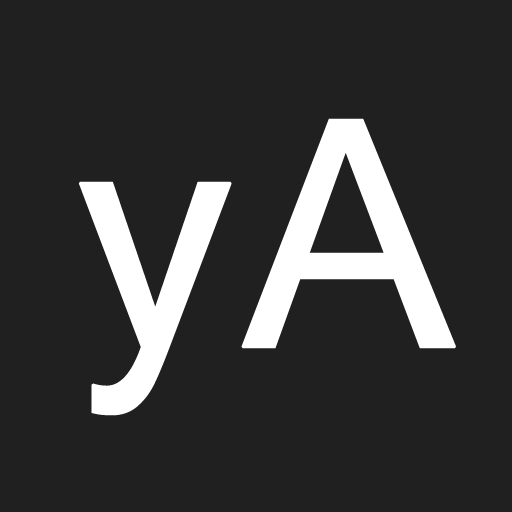
<style>
.page{position:relative;width:512px;height:512px;background:#202020}
.page>*{position:absolute;margin:0}
.t1{font:317.1px "MicrosoftSansSerif";color:#ffffff;font-weight:bold}
</style>
<div class="page">
<p class="t1" style="left:78px;top:118px;width:378px;height:298px">yA</p>
</div>
